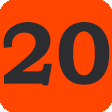
<style>
.page{position:relative;width:112px;height:112px;background:#ff4500}
.page>*{position:absolute;margin:0}
.t1{font:89px "BookmanOldStyle-Bold";color:#2b2d31;scale:0.95 1}
</style>
<div class="page">
<p class="t1" style="left:3px;top:22px;width:107px;height:64px">20</p>
</div>
